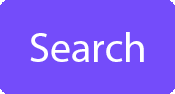
<style>
.page{position:relative;width:175px;height:94px;background:#744cfa}
.page>*{position:absolute;margin:0}
.t1{font:42px "MyriadPro-Regular";color:#ffffff}
</style>
<div class="page">
<p class="t1" style="left:30px;top:32px;width:114px;height:30px">Search</p>
</div>
